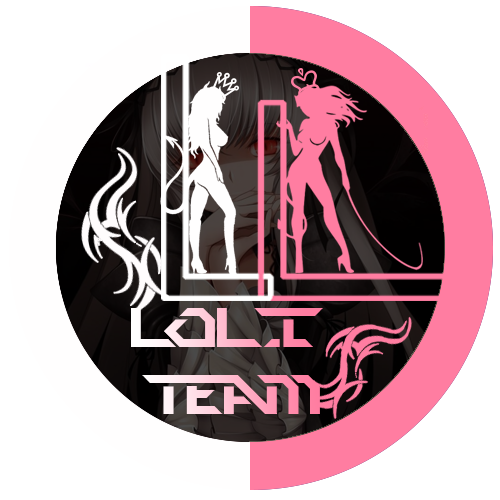
<style>
.page{position:relative;width:500px;height:500px;background:#ffffff}
.page>*{position:absolute;margin:0}
.t1{font:55.7px "PerfectDark(BRK)"}
</style>
<div class="page">
<p class="t1" style="left:131px;top:308px;width:192px;height:106px;text-align:center">LOLI <br>TEAM</p>
</div>
